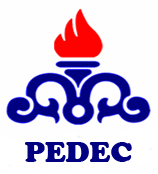
<style>
.page{position:relative;width:158px;height:174px;background:#fefefe}
.page>*{position:absolute;margin:0}
.t1{font:30px "CooperBlack";color:#000080}
</style>
<div class="page">
<p class="t1" style="left:17px;top:137px;width:115px;height:33px">PEDEC</p>
</div>
